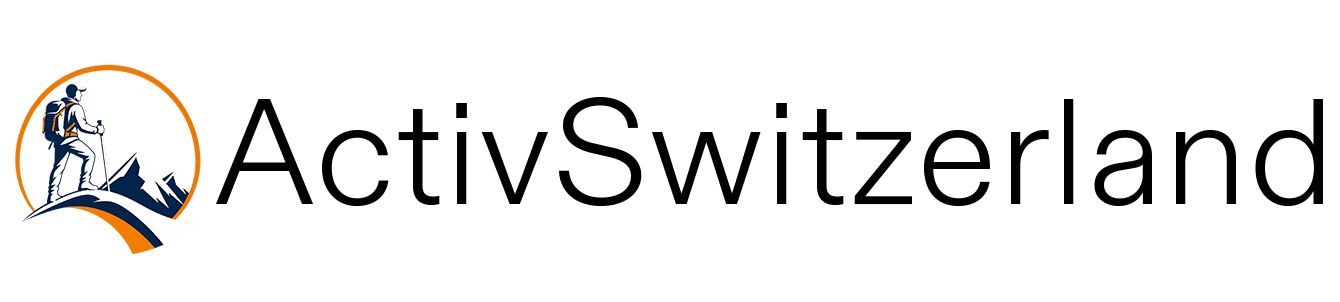
<style>
.page{position:relative;width:1340px;height:302px;background:#ffffff}
.page>*{position:absolute;margin:0}
.t1{font:150px "ABCDiatype-Light";letter-spacing:0.01em;color:#000000}
</style>
<div class="page">
<p class="t1" style="left:216px;top:96px;width:1107px;height:111px">ActivSwitzerland</p>
</div>
